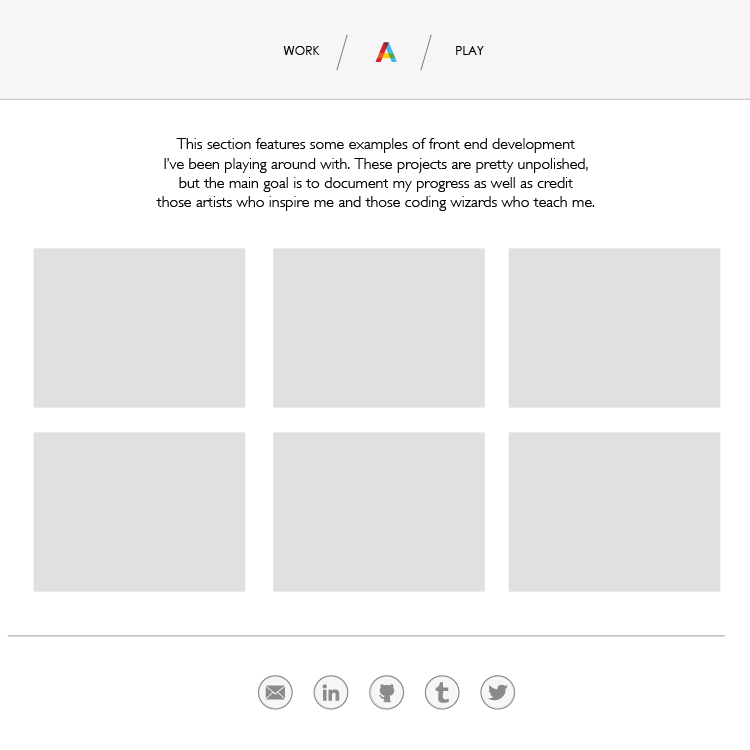
<style>
.page{position:relative;width:750px;height:750px;background:#ffffff}
.page>*{position:absolute;margin:0}
.t1{font:12px "CenturyGothic";color:#000000}
.t2{font:16px "GillSans-Light";color:#000000}
</style>
<div class="page">
<p class="t1" style="left:283px;top:46px;width:37px;height:9px">WORK</p>
<p class="t1" style="left:456px;top:46px;width:28px;height:9px">PLAY</p>
<p class="t2" style="left:156px;top:138px;width:439px;height:73px;text-align:center">This section features some examples of front end development <br>I’ve been playing around with. These projects are pretty unpolished, <br>but the main goal is to document my progress as well as credit <br>those artists who inspire me and those coding wizards who teach me.</p>
</div>
